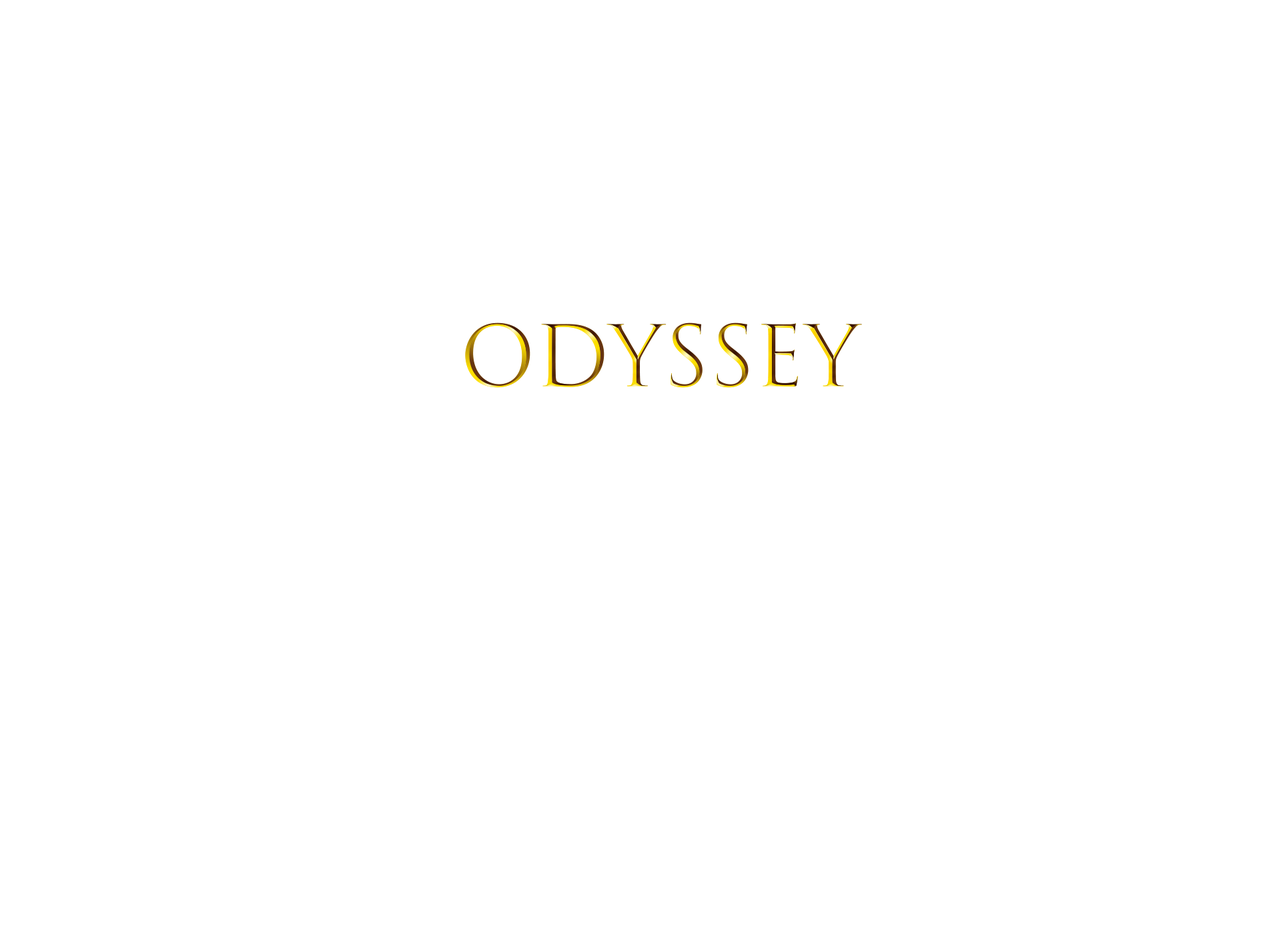
<style>
.page{position:relative;width:1261px;height:946px;background:#ffffff}
.page>*{position:absolute;margin:0}
.t1{font:82.1px "TrajanColor-Concept"}
</style>
<div class="page">
<p class="t1" style="left:465px;top:322px;width:397px;height:66px">Odyssey</p>
</div>
